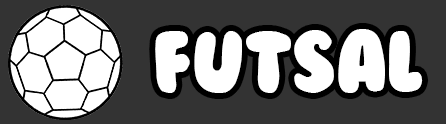
<style>
.page{position:relative;width:446px;height:124px;background:#333333}
.page>*{position:absolute;margin:0}
.t1{font:80px "BubbleGum";color:#ffffff}
</style>
<div class="page">
<p class="t1" style="left:155px;top:29px;width:268px;height:64px">Futsal</p>
</div>
